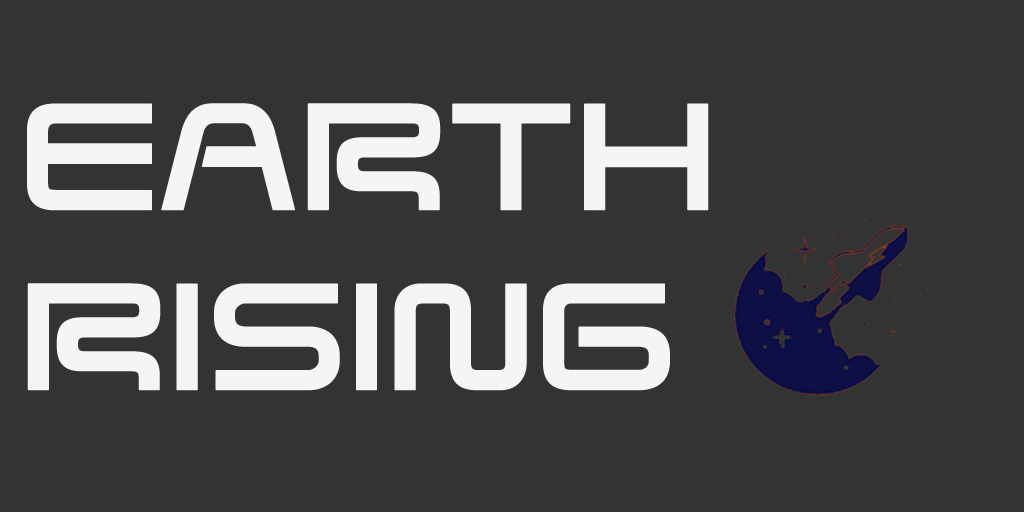
<style>
.page{position:relative;width:1024px;height:512px;background:#333333}
.page>*{position:absolute;margin:0}
.t1{font:150px "SavedByZero-Regular";color:#f5f5f5;font-weight:bold}
</style>
<div class="page">
<p class="t1" style="left:27px;top:103px;width:682px;height:288px">EARTH<br>RISING</p>
</div>
